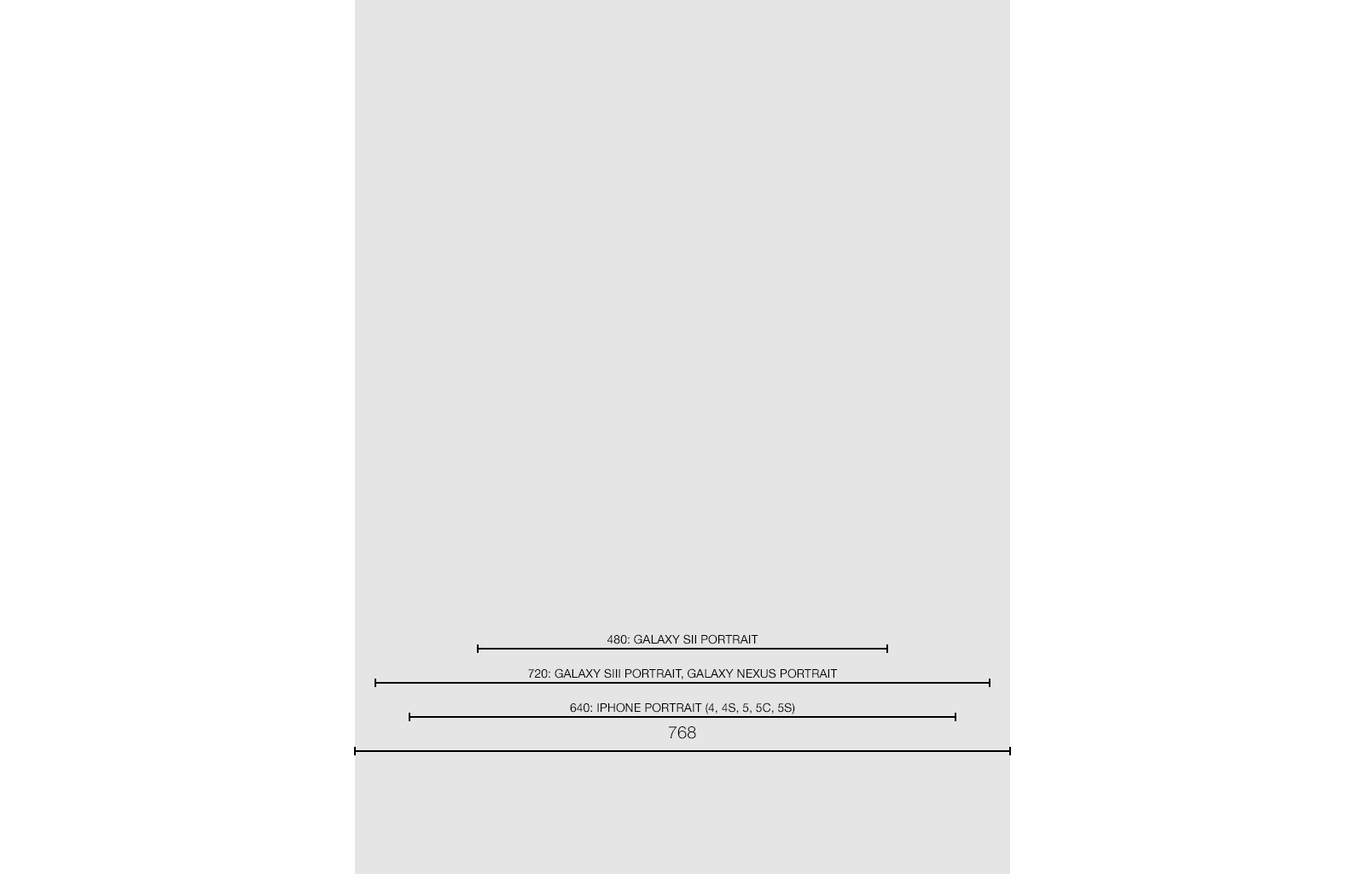
<style>
.page{position:relative;width:1365px;height:874px;background:#ffffff}
.page>*{position:absolute;margin:0}
.t1{font:11.9px "HelveticaNeue";color:#000000}
.t2{font:17.1px "HelveticaNeue-Light";color:#000000}
</style>
<div class="page">
<p class="t1" style="left:607px;top:634px;width:151px;height:10px">480: GALAXY SII PORTRAIT</p>
<p class="t1" style="left:528px;top:668px;width:310px;height:11px">720: GALAXY SIII PORTRAIT, GALAXY NEXUS PORTRAIT</p>
<p class="t1" style="left:570px;top:702px;width:225px;height:12px">640: IPHONE PORTRAIT (4, 4S, 5, 5C, 5S)</p>
<p class="t2" style="left:669px;top:726px;width:27px;height:13px">768</p>
</div>
